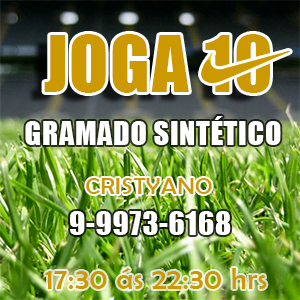
<style>
.page{position:relative;width:300px;height:300px}
.page>*{position:absolute;margin:0}
.t1{font:72px "Impact";letter-spacing:0.025em;color:#cc9900}
.t2{font:30px "Impact";letter-spacing:0.025em;color:#ffffff}
.t3{font:24px "BerlinSansFB-Reg";letter-spacing:0.025em;color:#cc9900}
.t4{font:30px "BerlinSansFB-Reg";letter-spacing:0.025em;color:#cc9900}
</style>
<div class="page">
<p class="t1" style="left:44px;top:34px;width:226px;height:59px">JOGA 10</p>
<p class="t2" style="left:25px;top:116px;width:256px;height:29px">GRAMADO SINTÉTICO</p>
<p class="t3" style="left:86px;top:178px;width:126px;height:16px">CRISTYANO</p>
<p class="t2" style="left:70px;top:211px;width:161px;height:24px">9-9973-6168</p>
<p class="t4" style="left:45px;top:268px;width:222px;height:21px">17:30 ás 22:30 hrs</p>
</div>
